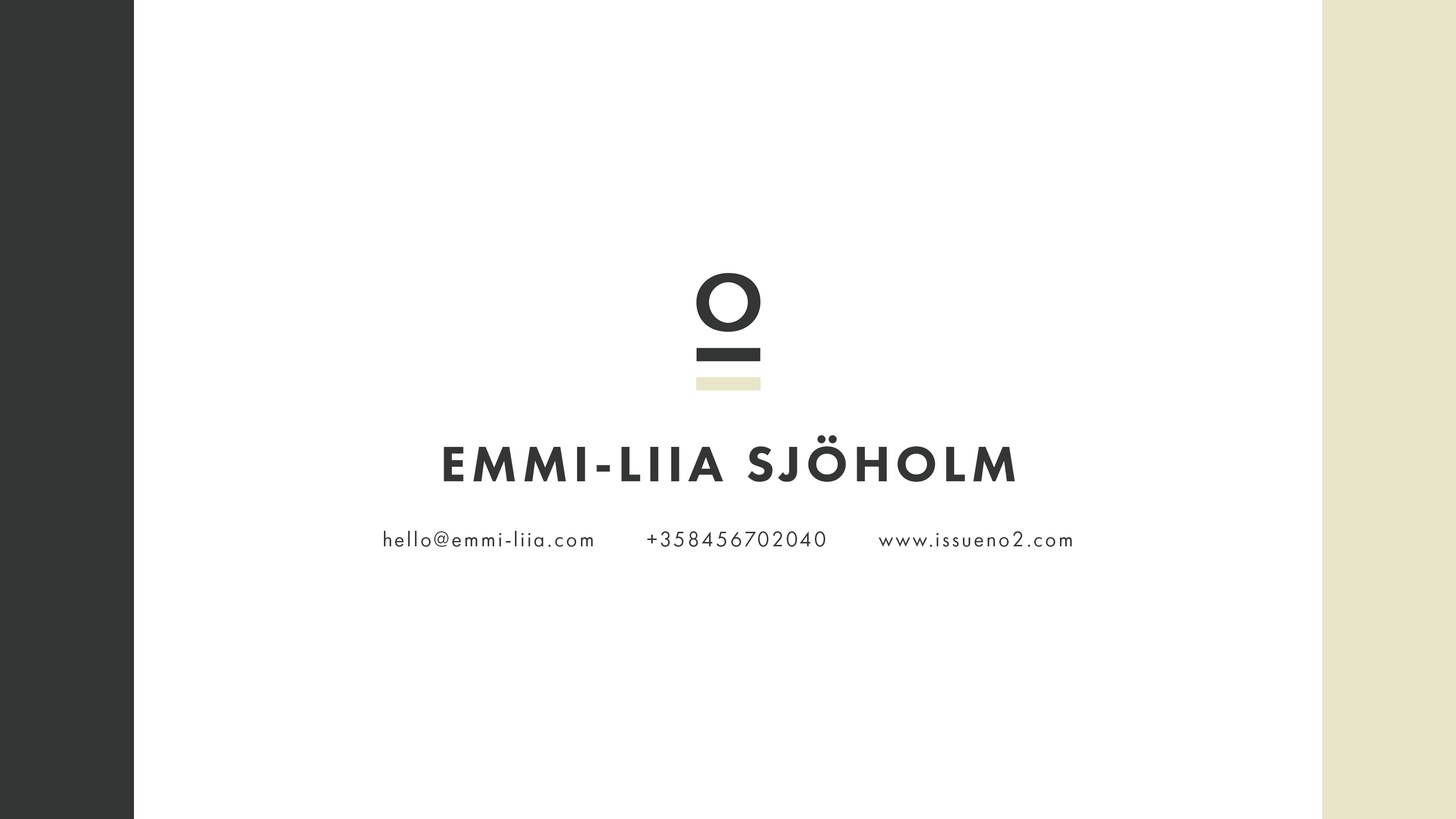
<style>
.page{position:relative;width:1456px;height:819px;background:#ffffff}
.page>*{position:absolute;margin:0}
.t1{font:51.8px "FuturaPT-Heavy";letter-spacing:0.1em;color:#343535}
.t2{font:21.6px "FuturaPT-Book";letter-spacing:0.1em;color:#343535}
</style>
<div class="page">
<p class="t1" style="left:444px;top:435px;width:571px;height:47px">EMMI-LIIA SJÖHOLM</p>
<p class="t2" style="left:384px;top:531px;width:688px;height:16px">hello@emmi-liia.com       +358456702040       www.issueno2.com</p>
</div>
